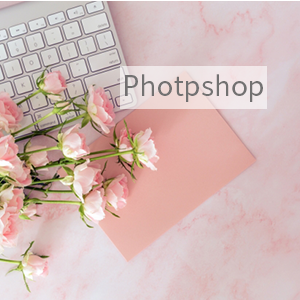
<style>
.page{position:relative;width:300px;height:300px}
.page>*{position:absolute;margin:0}
.t1{font:27.8px "SourceHanSansJP-Regular";color:#727171}
</style>
<div class="page">
<p class="t1" style="left:125px;top:74px;width:138px;height:28px">Photpshop</p>
</div>
